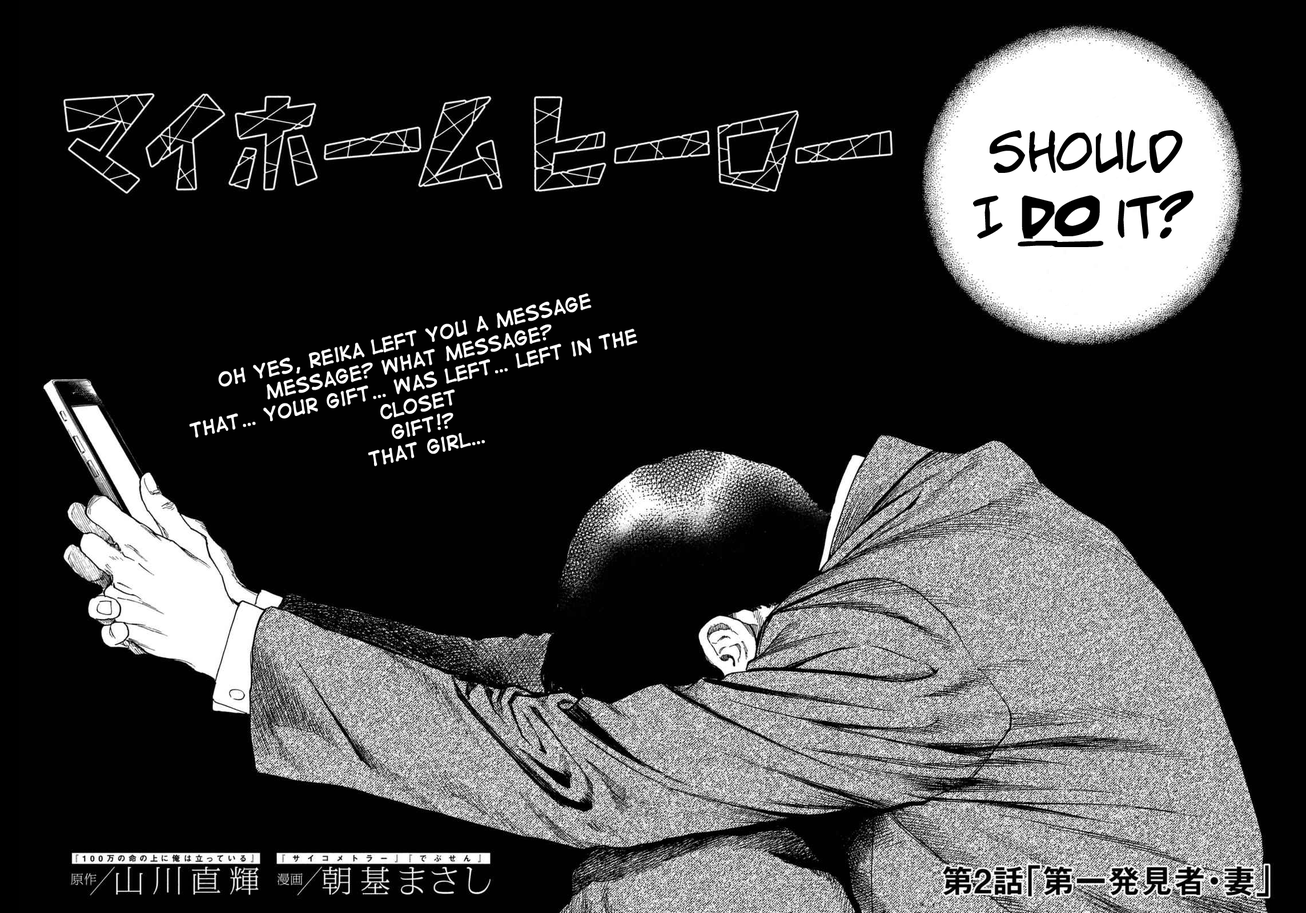
<style>
.page{position:relative;width:1306px;height:913px;background:#010101}
.page>*{position:absolute;margin:0}
.t1{font:54.8px "AdamWarrenpro";color:#000000}
.t2{font:54.8px "AdamWarrenpro-BoldItalic";color:#000000;font-weight:bold}
.t3{font:18.3px "DigitalStrip";color:#ffffff;font-weight:bold}
</style>
<div class="page">
<p class="t1" style="left:973px;top:130px;width:220px;height:117px;text-align:center">Should <br>I <span class="t2">do </span>it?</p>
<p class="t3" style="left:189px;top:293px;width:448px;height:173px;text-align:center;rotate:-12deg">Oh yes, Reika left you a message<br>Message? What message?<br>That… your gift… was left… left in the closet<br>Gift!?<br>That girl…</p>
</div>
